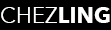
<style>
.page{position:relative;width:111px;height:30px;background:#000000}
.page>*{position:absolute;margin:0}
.t1{font:22.2px "AvenirNext-Regular";color:#ffffff}
.t2{font:22.2px "AvenirNext-Bold";color:#ffffff}
</style>
<div class="page">
<p class="t1" style="left:1px;top:7px;width:109px;height:16px">CHEZ<span class="t2">LING</span></p>
</div>
